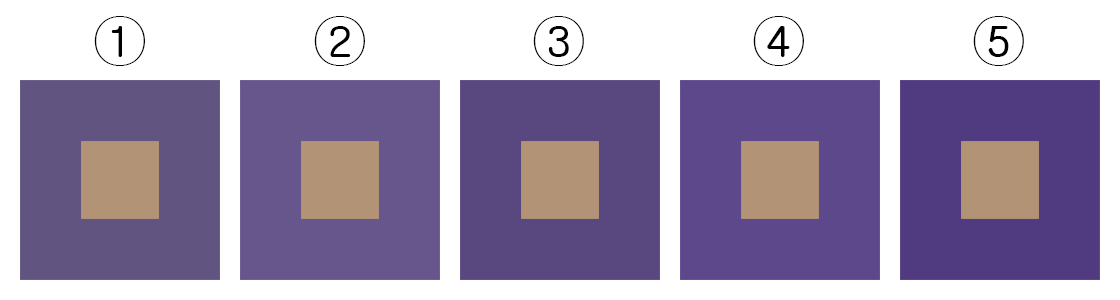
<style>
.page{position:relative;width:1120px;height:300px;background:#ffffff}
.page>*{position:absolute;margin:0}
.t1{font:55.7px "Gulim";letter-spacing:2.94em;color:#000000}
</style>
<div class="page">
<p class="t1" style="left:94px;top:16px;width:930px;height:50px">①②③④⑤</p>
</div>
